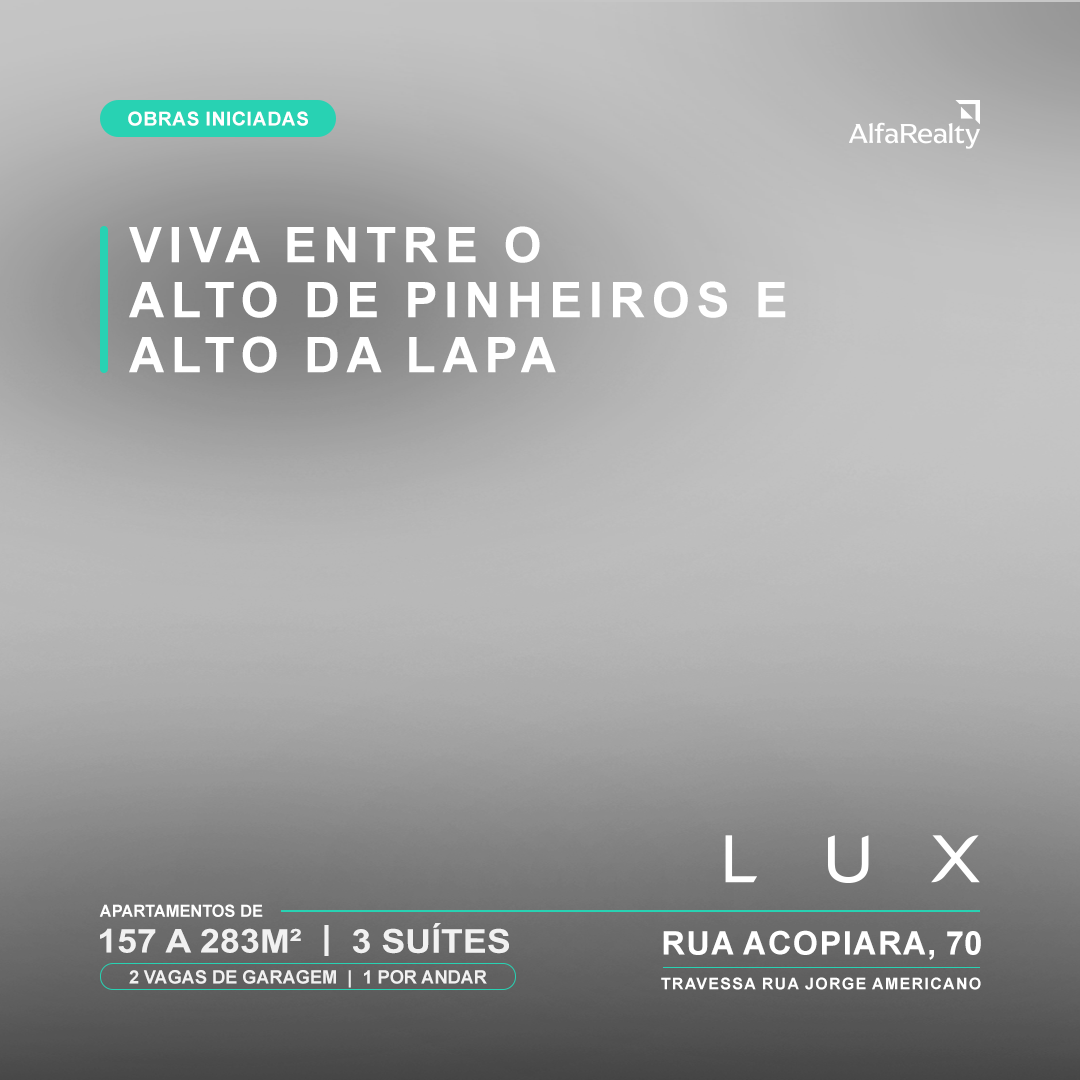
<style>
.page{position:relative;width:1080px;height:1080px}
.page>*{position:absolute;margin:0}
.t1{font:19.2px "Arial-BoldMT";color:#ffffff;text-transform:uppercase}
.t2{font:49.4px/55px "Arial-BoldMT";letter-spacing:0.1em;color:#ffffff;text-transform:uppercase}
.t3{font:16.4px "Arial-BoldMT";color:#ffffff}
.t4{font:33.1px "Arial-BoldMT";color:#f1f1f1;scale:1.08 1}
.t5{font:32.5px "Arial-BoldMT";letter-spacing:0.01em;color:#ffffff;text-transform:uppercase}
.t6{font:18.2px "Arial-BoldMT";color:#f1f1f1}
.t7{font:15.9px "Arial-BoldMT";letter-spacing:0.05em;color:#ffffff;text-transform:uppercase}
</style>
<div class="page">
<p class="t1" style="left:128px;top:111px;width:180px;height:15px">OBRAS INICIADAS</p>
<p class="t2" style="left:129px;top:226px;width:657px;height:147px">Viva entre o<br>alto de pinheiros e<br>alto da lapa</p>
<p class="t3" style="left:99px;top:904px;width:164px;height:13px">APARTAMENTOS DE</p>
<p class="t4" style="left:100px;top:923px;width:409px;height:33px">157 A 283M²  |  3 SUÍTES</p>
<p class="t5" style="left:663px;top:930px;width:318px;height:30px">RUA ACOPIARA, 70</p>
<p class="t6" style="left:129px;top:970px;width:358px;height:18px">2 VAGAS DE GARAGEM  |  1 POR ANDAR</p>
<p class="t7" style="left:661px;top:977px;width:320px;height:13px">TRAVESSA Rua Jorge Americano</p>
</div>
